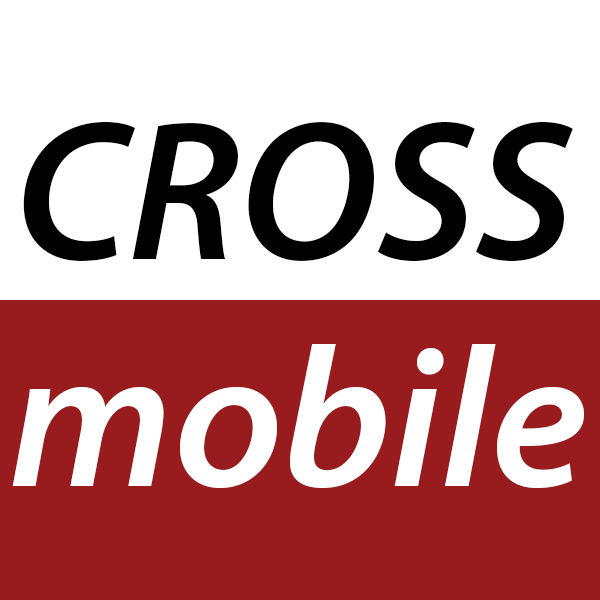
<style>
.page{position:relative;width:600px;height:600px;background:#ffffff}
.page>*{position:absolute;margin:0}
.t1{font:200px "MyriadPro-SemiboldIt";color:#000000}
.t2{font:200px "MyriadPro-SemiboldIt";color:#ffffff}
</style>
<div class="page">
<p class="t1" style="left:23px;top:121px;width:550px;height:140px">CROSS</p>
<p class="t2" style="left:12px;top:344px;width:572px;height:144px">mobile</p>
</div>
